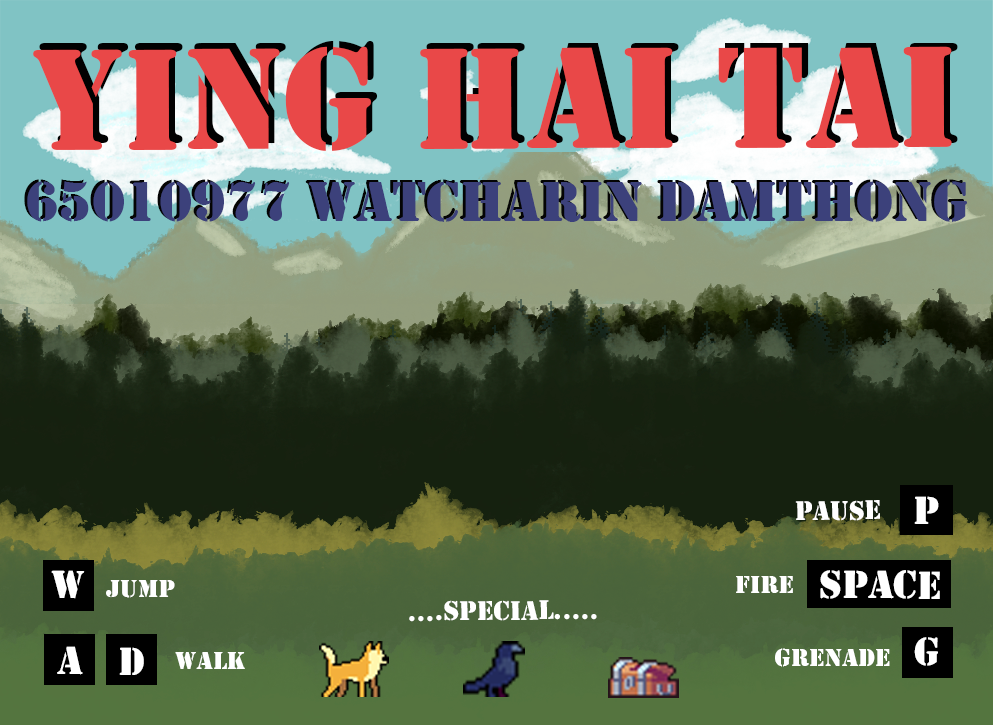
<style>
.page{position:relative;width:993px;height:725px}
.page>*{position:absolute;margin:0}
.t1{font:150px "Stencil";color:#e94848}
.t2{font:58.3px "Stencil"}
.t3{font:58.3px "Stencil";color:#3c417b}
.t4{font:41px "Stencil";color:#ffffff}
.t5{font:28px "Stencil";color:#ffffff}
.t6{font:26.2px "Stencil";color:#ffffff}
</style>
<div class="page">
<p class="t1" style="left:39px;top:41px;width:919px;height:104px">YING HAI TAI</p>
<p class="t1" style="left:33px;top:46px;width:919px;height:105px">YING HAI TAI</p>
<p class="t2" style="left:24px;top:179px;width:940px;height:41px">65010977 WATCHARIN DAMTHONG</p>
<p class="t3" style="left:27px;top:181px;width:940px;height:41px">65010977 WATCHARIN DAMTHONG</p>
<p class="t4" style="left:914px;top:496px;width:25px;height:28px">p</p>
<p class="t5" style="left:795px;top:500px;width:85px;height:21px;rotate:-1deg">pause</p>
<p class="t4" style="left:51px;top:570px;width:34px;height:29px">w</p>
<p class="t6" style="left:106px;top:580px;width:69px;height:18px">JUMP</p>
<p class="t6" style="left:736px;top:576px;width:57px;height:17px">FIRE</p>
<p class="t4" style="left:820px;top:570px;width:120px;height:29px">SPACE</p>
<p class="t5" style="left:409px;top:600px;width:188px;height:22px;rotate:-1deg">....SPECIAL.....</p>
<p class="t4" style="left:914px;top:637px;width:24px;height:29px">G</p>
<p class="t4" style="left:57px;top:646px;width:26px;height:29px">a</p>
<p class="t4" style="left:119px;top:647px;width:25px;height:28px">D</p>
<p class="t6" style="left:175px;top:652px;width:70px;height:17px">walk</p>
<p class="t6" style="left:775px;top:648px;width:115px;height:19px">grenade</p>
</div>
